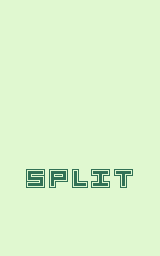
<style>
.page{position:relative;width:160px;height:256px;background:#e0f8d0}
.page>*{position:absolute;margin:0}
.t1{font:24px "5x5-Pixel";letter-spacing:0.2em;color:#327156}
</style>
<div class="page">
<p class="t1" style="left:28px;top:171px;width:103px;height:15px">SPLIT</p>
</div>
